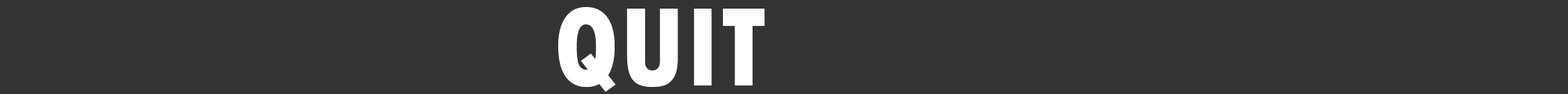
<style>
.page{position:relative;width:1568px;height:94px;background:#333333}
.page>*{position:absolute;margin:0}
.t1{font:117.6px "TwCenMT-CondensedExtraBold";color:#ffffff}
</style>
<div class="page">
<p class="t1" style="left:558px;top:7px;width:207px;height:86px">QUIT</p>
</div>
